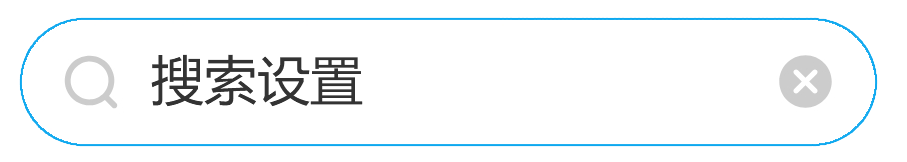
<style>
.page{position:relative;width:907px;height:162px;background:#ffffff}
.page>*{position:absolute;margin:0}
.t1{font:53.3px "MicrosoftYaHei";color:#333333}
</style>
<div class="page">
<p class="t1" style="left:151px;top:54px;width:212px;height:53px">搜索设置</p>
</div>
